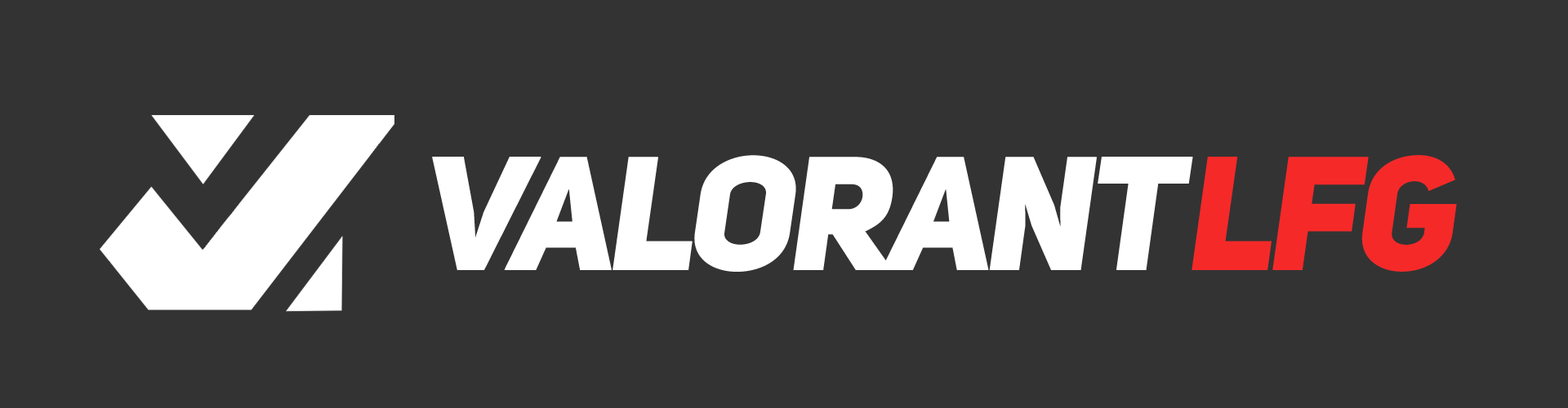
<style>
.page{position:relative;width:1568px;height:408px;background:#333333}
.page>*{position:absolute;margin:0}
.t1{font:158.9px "UniSansHeavyItalicCAPS";letter-spacing:-0.06em;color:#ffffff;text-transform:uppercase;font-weight:bold}
.t2{font:158.9px "UniSansHeavyItalicCAPS";letter-spacing:-0.06em;color:#f62929;text-transform:uppercase;font-weight:bold}
</style>
<div class="page">
<p class="t1" style="left:432px;top:155px;width:761px;height:117px">VALORANT</p>
<p class="t2" style="left:1192px;top:155px;width:265px;height:117px">LFG</p>
</div>
